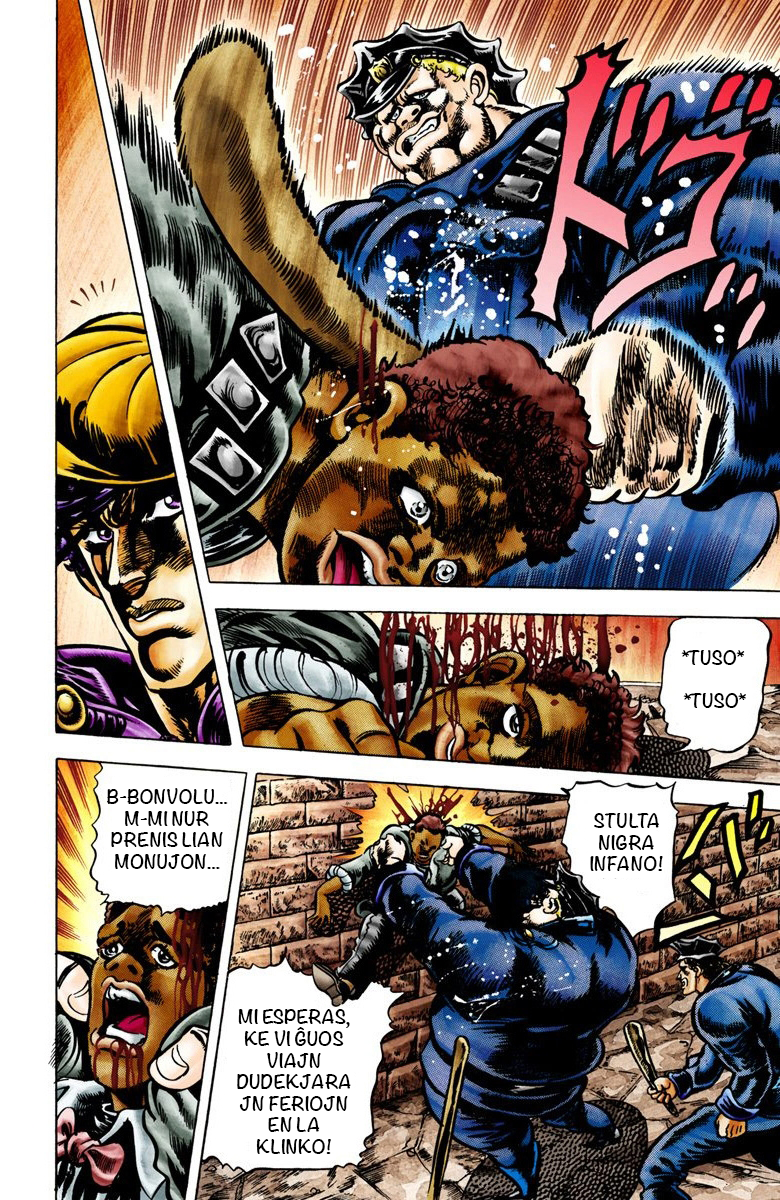
<style>
.page{position:relative;width:780px;height:1200px}
.page>*{position:absolute;margin:0}
.t1{font:18px "Noteworthy-Bold";color:#000000}
</style>
<div class="page">
<p class="t1" style="left:681px;top:650px;width:65px;height:58px;text-align:center">*TUSO*<br><br> *TUSO*</p>
<p class="t1" style="left:107px;top:788px;width:121px;height:81px;text-align:center">B-BONVOLU...M-MI NUR PRENIS LIAN MONUJON...</p>
<p class="t1" style="left:590px;top:813px;width:73px;height:58px;text-align:center">STULTA NIGRA INFANO!</p>
<p class="t1" style="left:237px;top:1009px;width:114px;height:145px;text-align:center">MI ESPERAS, KE VI ĜUOS VIAJN DUDEKJARAJN FERIOJN EN LA KLINKO!</p>
</div>
